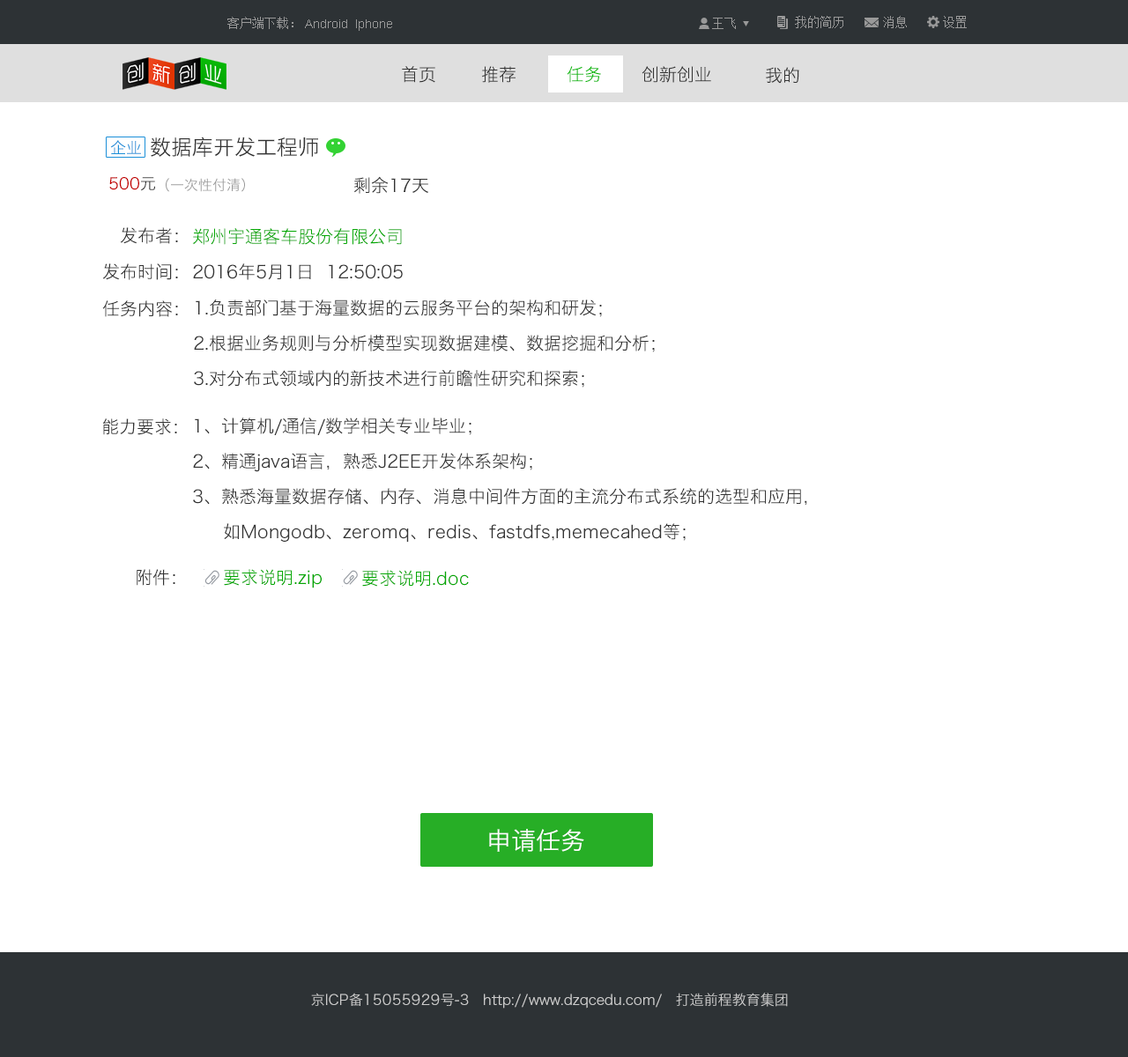
<style>
.page{position:relative;width:1128px;height:1057px;background:#ffffff}
.page>*{position:absolute;margin:0}
.t1{font:12.3px "SimSun";color:#999999}
.t2{font:12.3px "ArialMT";color:#999999}
.t3{font:17.6px "HiraginoSansGB-W3";color:#333333}
.t4{font:17.6px "HiraginoSansGB-W3";color:#09ba08}
.t5{font:21.1px "HiraginoSansGB-W3";color:#333333}
.t6{font:15.9px "HiraginoSansGB-W3";color:#1b8fd8}
.t7{font:15.9px "HiraginoSansGB-W3";color:#c30000}
.t8{font:15.9px "HiraginoSansGB-W3";color:#333333}
.t9{font:14.1px "HiraginoSansGB-W3";color:#999999}
.t10{font:17.6px "HiraginoSansGB-W3";color:#02a801}
.t11{font:17.6px/35.2px "HiraginoSansGB-W3";color:#333333}
.t12{font:24.7px "HiraginoSansGB-W3";color:#ffffff}
.t13{font:14.1px "HiraginoSansGB-W3";color:#cccccc}
</style>
<div class="page">
<p class="t1" style="left:227px;top:17px;width:66px;height:12px">客户端下载：</p>
<p class="t1" style="left:712px;top:18px;width:24px;height:11px">王飞</p>
<p class="t1" style="left:795px;top:16px;width:48px;height:12px">我的简历</p>
<p class="t1" style="left:883px;top:16px;width:24px;height:12px">消息</p>
<p class="t1" style="left:943px;top:16px;width:24px;height:12px">设置</p>
<p class="t2" style="left:305px;top:19px;width:87px;height:12px">Android  Iphone</p>
<p class="t3" style="left:402px;top:66px;width:33px;height:17px">首页</p>
<p class="t3" style="left:482px;top:66px;width:33px;height:17px">推荐</p>
<p class="t4" style="left:567px;top:66px;width:34px;height:17px">任务</p>
<p class="t3" style="left:641px;top:66px;width:70px;height:17px">创新创业</p>
<p class="t3" style="left:766px;top:67px;width:33px;height:17px">我的</p>
<p class="t5" style="left:151px;top:137px;width:167px;height:20px">数据库开发工程师</p>
<p class="t6" style="left:110px;top:140px;width:31px;height:15px">企业</p>
<p class="t7" style="left:109px;top:177px;width:46px;height:14px">500<span class="t8">元</span></p>
<p class="t9" style="left:166px;top:178px;width:79px;height:14px">（一次性付清）</p>
<p class="t3" style="left:353px;top:176px;width:75px;height:18px">剩余17天</p>
<p class="t3" style="left:120px;top:227px;width:58px;height:17px">发布者：</p>
<p class="t10" style="left:192px;top:228px;width:210px;height:17px">郑州宇通客车股份有限公司</p>
<p class="t3" style="left:102px;top:263px;width:76px;height:17px">发布时间：</p>
<p class="t3" style="left:193px;top:263px;width:210px;height:17px">2016年5月1日  12:50:05</p>
<p class="t3" style="left:102px;top:300px;width:76px;height:17px">任务内容：</p>
<p class="t11" style="left:194px;top:300px;width:461px;height:88px">1.负责部门基于海量数据的云服务平台的架构和研发；<br>2.根据业务规则与分析模型实现数据建模、数据挖掘和分析；<br>3.对分布式领域内的新技术进行前瞻性研究和探索；</p>
<p class="t3" style="left:102px;top:419px;width:75px;height:16px">能力要求：</p>
<p class="t11" style="left:193px;top:418px;width:614px;height:125px">1、计算机/通信/数学相关专业毕业；<br>2、精通java语言，熟悉J2EE开发体系架构；<br>3、熟悉海量数据存储、内存、消息中间件方面的主流分布式系统的选型和应用，<br>     如Mongodb、zeromq、redis、fastdfs,memecahed等；</p>
<p class="t3" style="left:137px;top:569px;width:38px;height:17px">附件：</p>
<p class="t10" style="left:224px;top:569px;width:98px;height:20px">要求说明.zip</p>
<p class="t10" style="left:362px;top:570px;width:107px;height:17px">要求说明.doc</p>
<p class="t12" style="left:489px;top:829px;width:95px;height:23px">申请任务</p>
<p class="t13" style="left:311px;top:993px;width:477px;height:16px">京ICP备15055929号-3   http://www.dzqcedu.com/   打造前程教育集团</p>
</div>
